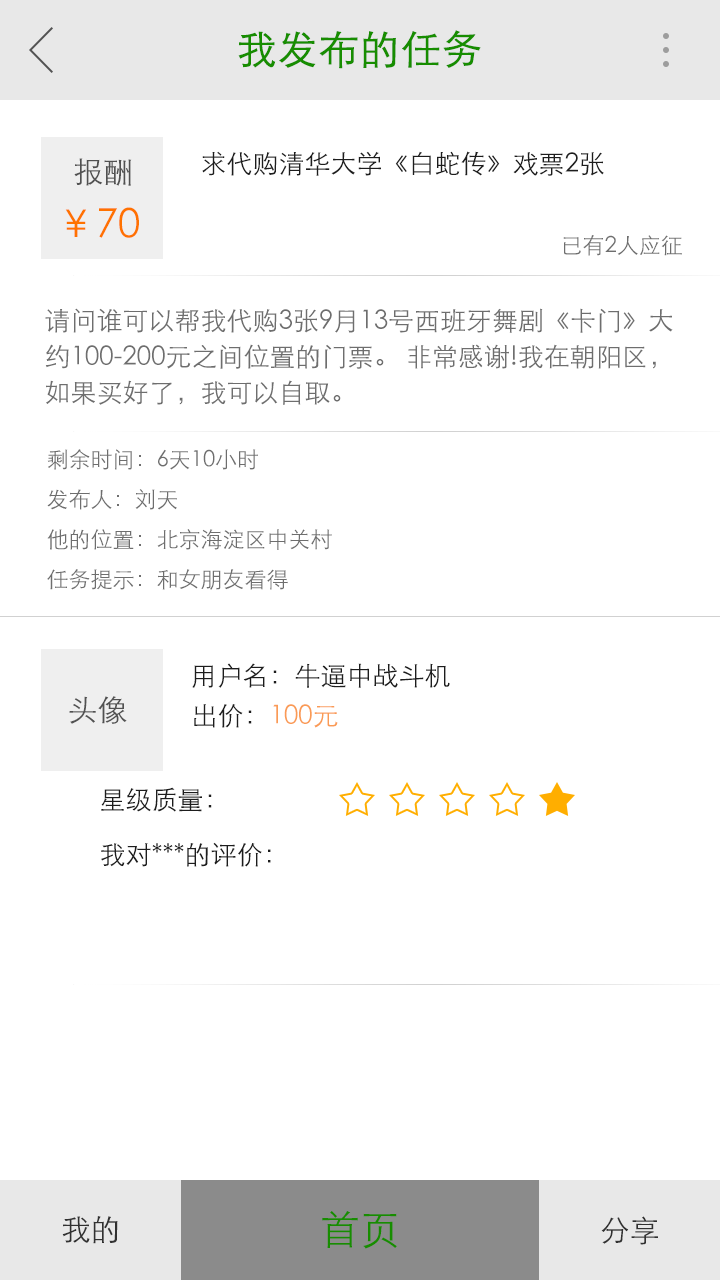
<style>
.page{position:relative;width:720px;height:1280px;background:#ffffff}
.page>*{position:absolute;margin:0}
.t1{font:40px "STXihei";color:#178d00;font-weight:bold}
.t2{font:40px/12px "STXihei";color:#ff7200}
.t3{font:36px/52px "STXihei";color:#767676}
.t4{font:30px/12px "STXihei";color:#515151}
.t5{font:26px "STXihei";color:#1d1d1d}
.t6{font:22px "STXihei";color:#6e6e6e}
.t7{font:26px/36px "STXihei";color:#6e6e6e}
.t8{font:30px "STXihei";color:#515151}
.t9{font:26px "STXihei";color:#fa9b55}
.t10{font:30px "STXihei";color:#313131}
.t11{font:40px "STXihei";color:#178d00}
</style>
<div class="page">
<p class="t1" style="left:238px;top:30px;width:243px;height:39px">我发布的任务</p>
<p class="t2" style="left:65px;top:158px;width:74px;height:80px;text-align:justify"><span class="t3">  </span><span class="t4">报酬<br></span>￥70</p>
<p class="t5" style="left:202px;top:151px;width:402px;height:25px">求代购清华大学《白蛇传》戏票2张</p>
<p class="t6" style="left:563px;top:235px;width:119px;height:21px">已有2人应征</p>
<p class="t7" style="left:45px;top:308px;width:628px;height:97px;text-align:justify">请问谁可以帮我代购3张9月13号西班牙舞剧《卡门》大<br>约100-200元之间位置的门票。 非常感谢!我在朝阳区，<br>如果买好了，我可以自取。</p>
<p class="t6" style="left:47px;top:449px;width:211px;height:21px">剩余时间：6天10小时</p>
<p class="t6" style="left:47px;top:489px;width:130px;height:21px">发布人：刘天</p>
<p class="t6" style="left:47px;top:529px;width:285px;height:21px">他的位置：北京海淀区中关村</p>
<p class="t6" style="left:47px;top:569px;width:241px;height:21px">任务提示：和女朋友看得</p>
<p class="t5" style="left:192px;top:663px;width:258px;height:25px">用户名：牛逼中战斗机</p>
<p class="t8" style="left:69px;top:696px;width:58px;height:28px">头像</p>
<p class="t9" style="left:194px;top:704px;width:144px;height:24px"><span class="t5">出价：</span>100元</p>
<p class="t5" style="left:101px;top:787px;width:111px;height:25px">星级质量：</p>
<p class="t5" style="left:101px;top:842px;width:170px;height:25px">我对***的评价：</p>
<p class="t10" style="left:62px;top:1216px;width:56px;height:28px">我的</p>
<p class="t11" style="left:322px;top:1211px;width:75px;height:38px">首页</p>
<p class="t10" style="left:601px;top:1216px;width:57px;height:29px">分享</p>
</div>
